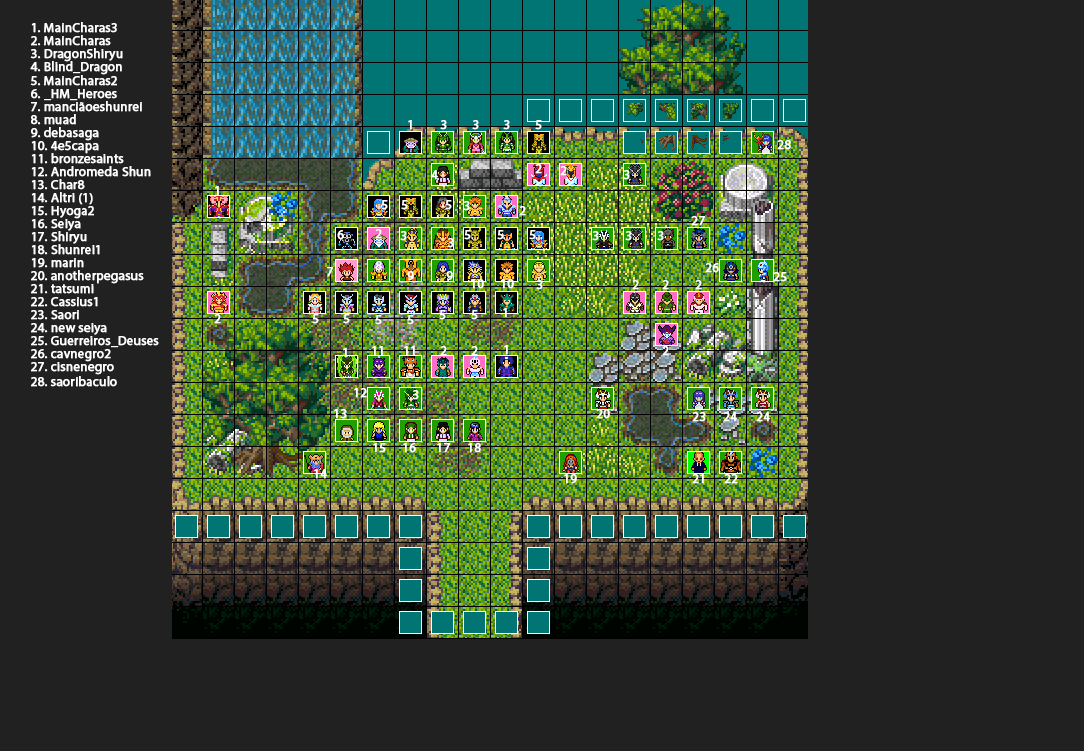
<style>
.page{position:relative;width:1084px;height:751px;background:#212121}
.page>*{position:absolute;margin:0}
.t1{font:13px "MyriadPro-Regular";color:#ffffff;font-weight:bold}
</style>
<div class="page">
<p class="t1" style="left:31px;top:22px;width:86px;height:11px">1. MainCharas3</p>
<p class="t1" style="left:31px;top:35px;width:80px;height:11px">2. MainCharas</p>
<p class="t1" style="left:30px;top:48px;width:93px;height:14px">3. DragonShiryu</p>
<p class="t1" style="left:30px;top:61px;width:92px;height:14px">4. Blind_Dragon</p>
<p class="t1" style="left:30px;top:75px;width:87px;height:11px">5. MainCharas2</p>
<p class="t1" style="left:31px;top:89px;width:86px;height:12px">6. _HM_Heroes</p>
<p class="t1" style="left:31px;top:101px;width:111px;height:11px">7. manciãoeshunrei</p>
<p class="t1" style="left:31px;top:114px;width:45px;height:11px">8. muad</p>
<p class="t1" style="left:408px;top:120px;width:4px;height:10px">1</p>
<p class="t1" style="left:440px;top:120px;width:7px;height:10px">3</p>
<p class="t1" style="left:472px;top:120px;width:7px;height:10px">3</p>
<p class="t1" style="left:503px;top:120px;width:7px;height:10px">3</p>
<p class="t1" style="left:535px;top:120px;width:7px;height:10px">5</p>
<p class="t1" style="left:31px;top:127px;width:68px;height:14px">9. debasaga</p>
<p class="t1" style="left:31px;top:141px;width:68px;height:13px">10. 4e5capa</p>
<p class="t1" style="left:777px;top:140px;width:14px;height:10px">28</p>
<p class="t1" style="left:31px;top:153px;width:93px;height:11px">11. bronzesaints</p>
<p class="t1" style="left:31px;top:166px;width:120px;height:11px">12. Andromeda Shun</p>
<p class="t1" style="left:431px;top:170px;width:7px;height:10px">4</p>
<p class="t1" style="left:535px;top:164px;width:7px;height:10px">2</p>
<p class="t1" style="left:560px;top:166px;width:7px;height:10px">2</p>
<p class="t1" style="left:623px;top:170px;width:7px;height:10px">3</p>
<p class="t1" style="left:31px;top:179px;width:54px;height:11px">13. Char8</p>
<p class="t1" style="left:31px;top:192px;width:62px;height:13px">14. Altri (1)</p>
<p class="t1" style="left:215px;top:186px;width:4px;height:10px">1</p>
<p class="t1" style="left:31px;top:206px;width:63px;height:13px">15. Hyoga2</p>
<p class="t1" style="left:381px;top:200px;width:7px;height:10px">5</p>
<p class="t1" style="left:401px;top:200px;width:7px;height:10px">5</p>
<p class="t1" style="left:445px;top:200px;width:7px;height:10px">5</p>
<p class="t1" style="left:463px;top:201px;width:7px;height:10px">3</p>
<p class="t1" style="left:519px;top:206px;width:7px;height:10px">2</p>
<p class="t1" style="left:31px;top:219px;width:50px;height:12px">16. Seiya</p>
<p class="t1" style="left:691px;top:216px;width:14px;height:10px">27</p>
<p class="t1" style="left:31px;top:231px;width:56px;height:13px">17. Shiryu</p>
<p class="t1" style="left:337px;top:230px;width:7px;height:10px">6</p>
<p class="t1" style="left:375px;top:229px;width:7px;height:10px">2</p>
<p class="t1" style="left:400px;top:231px;width:7px;height:10px">3</p>
<p class="t1" style="left:464px;top:230px;width:7px;height:10px">5</p>
<p class="t1" style="left:497px;top:230px;width:7px;height:10px">5</p>
<p class="t1" style="left:529px;top:230px;width:7px;height:10px">5</p>
<p class="t1" style="left:592px;top:231px;width:7px;height:10px">3</p>
<p class="t1" style="left:625px;top:231px;width:7px;height:10px">3</p>
<p class="t1" style="left:657px;top:231px;width:7px;height:10px">3</p>
<p class="t1" style="left:31px;top:244px;width:69px;height:11px">18. Shunrei1</p>
<p class="t1" style="left:447px;top:238px;width:7px;height:10px">3</p>
<p class="t1" style="left:31px;top:258px;width:53px;height:10px">19. marin</p>
<p class="t1" style="left:31px;top:270px;width:113px;height:14px">20. anotherpegasus</p>
<p class="t1" style="left:327px;top:267px;width:6px;height:10px">7</p>
<p class="t1" style="left:375px;top:261px;width:7px;height:10px">8</p>
<p class="t1" style="left:705px;top:263px;width:14px;height:10px">26</p>
<p class="t1" style="left:407px;top:271px;width:7px;height:10px">9</p>
<p class="t1" style="left:446px;top:271px;width:7px;height:10px">9</p>
<p class="t1" style="left:471px;top:279px;width:13px;height:10px">10</p>
<p class="t1" style="left:501px;top:279px;width:13px;height:10px">10</p>
<p class="t1" style="left:536px;top:280px;width:7px;height:10px">3</p>
<p class="t1" style="left:632px;top:280px;width:7px;height:10px">2</p>
<p class="t1" style="left:662px;top:280px;width:7px;height:10px">2</p>
<p class="t1" style="left:695px;top:280px;width:7px;height:10px">2</p>
<p class="t1" style="left:773px;top:272px;width:14px;height:10px">25</p>
<p class="t1" style="left:31px;top:284px;width:63px;height:10px">21. tatsumi</p>
<p class="t1" style="left:31px;top:297px;width:67px;height:10px">22. Cassius1</p>
<p class="t1" style="left:31px;top:310px;width:48px;height:10px">23. Saori</p>
<p class="t1" style="left:214px;top:314px;width:7px;height:10px">2</p>
<p class="t1" style="left:312px;top:314px;width:7px;height:10px">5</p>
<p class="t1" style="left:343px;top:314px;width:7px;height:10px">5</p>
<p class="t1" style="left:375px;top:315px;width:7px;height:10px">5</p>
<p class="t1" style="left:407px;top:315px;width:7px;height:10px">5</p>
<p class="t1" style="left:439px;top:310px;width:7px;height:10px">5</p>
<p class="t1" style="left:471px;top:310px;width:7px;height:10px">5</p>
<p class="t1" style="left:503px;top:308px;width:4px;height:10px">1</p>
<p class="t1" style="left:31px;top:323px;width:76px;height:12px">24. new seiya</p>
<p class="t1" style="left:31px;top:336px;width:128px;height:12px">25. Guerreiros_Deuses</p>
<p class="t1" style="left:31px;top:349px;width:80px;height:13px">26. cavnegro2</p>
<p class="t1" style="left:343px;top:348px;width:4px;height:10px">1</p>
<p class="t1" style="left:372px;top:346px;width:11px;height:10px">11</p>
<p class="t1" style="left:404px;top:346px;width:11px;height:10px">11</p>
<p class="t1" style="left:440px;top:346px;width:7px;height:10px">2</p>
<p class="t1" style="left:471px;top:346px;width:7px;height:10px">2</p>
<p class="t1" style="left:504px;top:345px;width:4px;height:10px">1</p>
<p class="t1" style="left:662px;top:346px;width:7px;height:10px">2</p>
<p class="t1" style="left:31px;top:362px;width:86px;height:25px">27. cisnenegro<br>28. saoribaculo</p>
<p class="t1" style="left:354px;top:388px;width:13px;height:10px">12</p>
<p class="t1" style="left:412px;top:390px;width:7px;height:10px">3</p>
<p class="t1" style="left:334px;top:409px;width:13px;height:10px">13</p>
<p class="t1" style="left:596px;top:409px;width:14px;height:10px">20</p>
<p class="t1" style="left:692px;top:412px;width:14px;height:10px">23</p>
<p class="t1" style="left:723px;top:412px;width:14px;height:10px">24</p>
<p class="t1" style="left:756px;top:412px;width:14px;height:10px">24</p>
<p class="t1" style="left:373px;top:443px;width:13px;height:10px">15</p>
<p class="t1" style="left:403px;top:443px;width:13px;height:10px">16</p>
<p class="t1" style="left:437px;top:443px;width:13px;height:10px">17</p>
<p class="t1" style="left:468px;top:443px;width:13px;height:10px">18</p>
<p class="t1" style="left:314px;top:469px;width:13px;height:10px">14</p>
<p class="t1" style="left:564px;top:474px;width:13px;height:10px">19</p>
<p class="t1" style="left:692px;top:474px;width:12px;height:10px">21</p>
<p class="t1" style="left:724px;top:474px;width:14px;height:10px">22</p>
</div>
